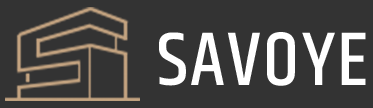
<style>
.page{position:relative;width:373px;height:108px;background:#333333}
.page>*{position:absolute;margin:0}
.t1{font:77px "Khand-Medium";letter-spacing:0.03em;color:#ffffff}
</style>
<div class="page">
<p class="t1" style="left:159px;top:32px;width:207px;height:54px">SAVOYE</p>
</div>
